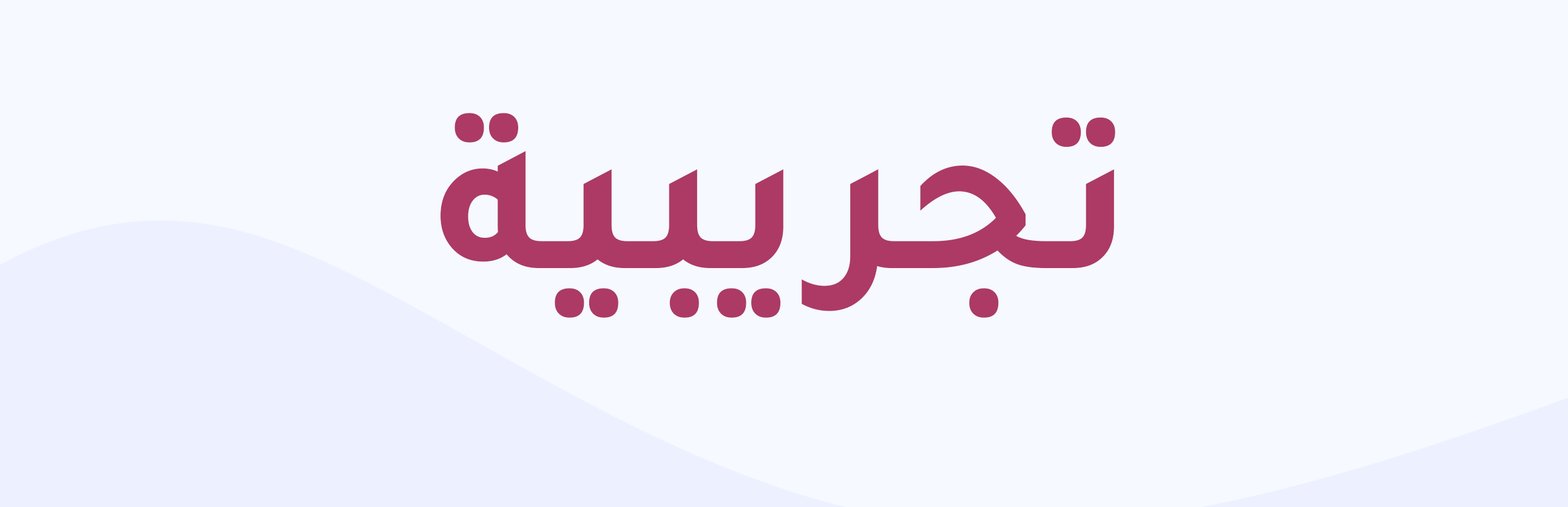
<style>
.page{position:relative;width:1568px;height:507px;background:#f6f9ff}
.page>*{position:absolute;margin:0}
.t1{font:222.5px "Tajawal-Bold";color:#ac3a64}
</style>
<div class="page">
<p class="t1" style="left:441px;top:113px;width:674px;height:205px">تجريبية</p>
</div>
